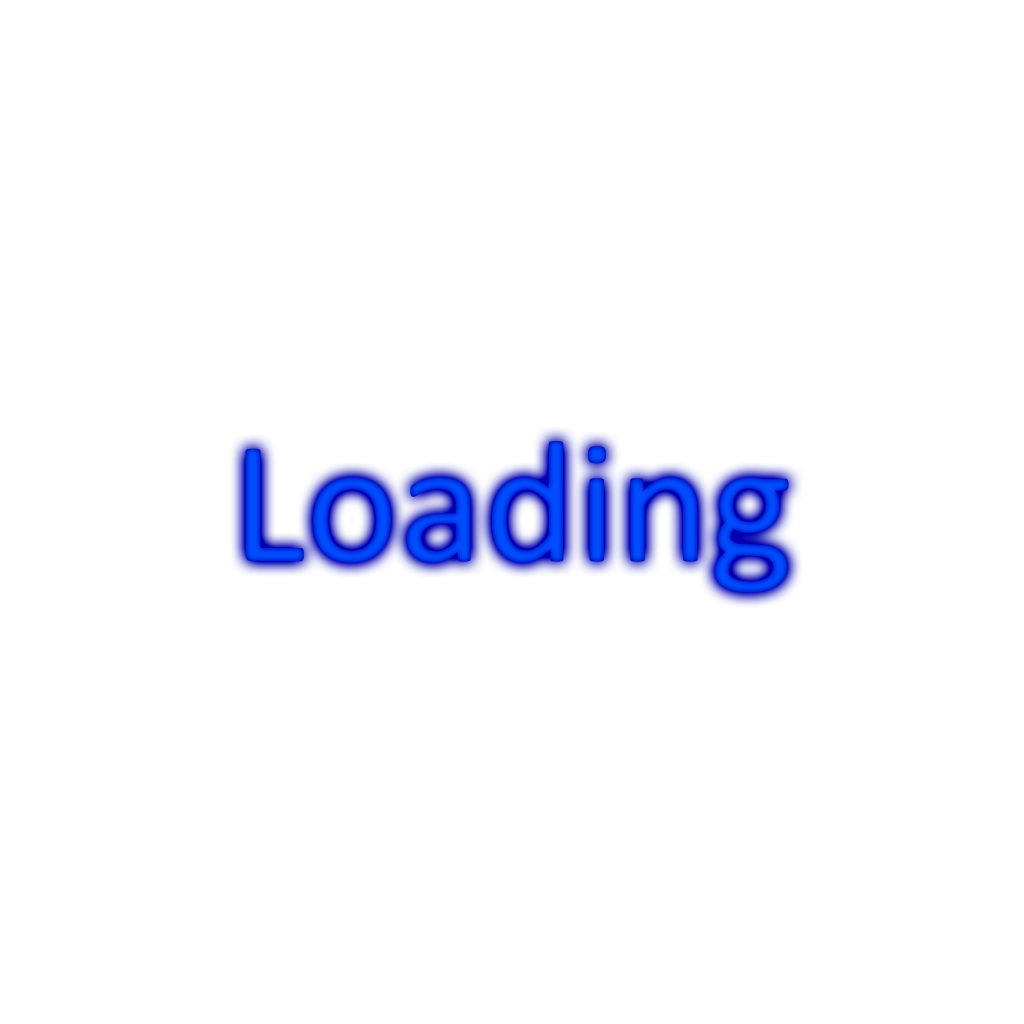
<style>
.page{position:relative;width:1024px;height:1024px;background:#ffffff}
.page>*{position:absolute;margin:0}
.t1{font:177px "Calibri";color:#0042f4}
</style>
<div class="page">
<p class="t1" style="left:245px;top:441px;width:544px;height:152px">Loading</p>
</div>
